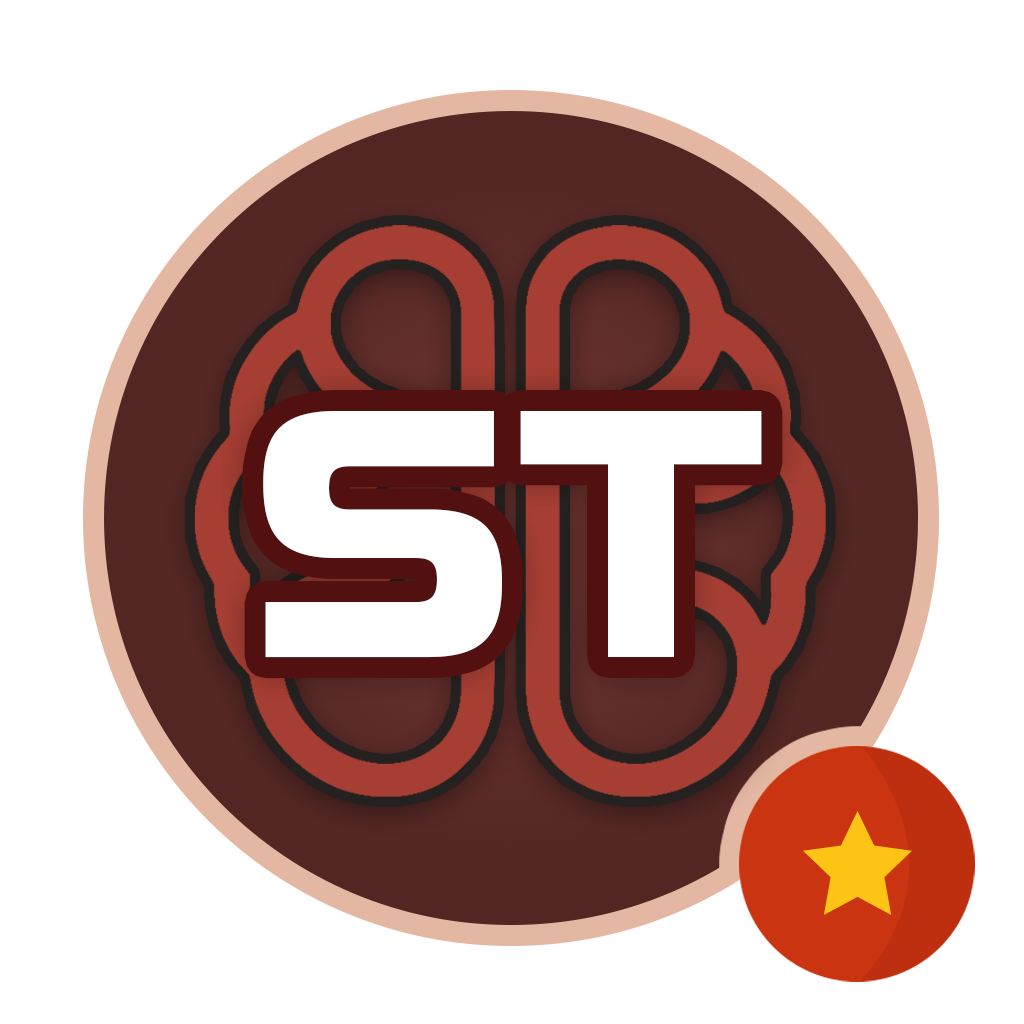
<style>
.page{position:relative;width:1024px;height:1024px;background:#ffffff}
.page>*{position:absolute;margin:0}
.t1{font:337px "ToxigenesisRg-Bold";color:#ffffff}
</style>
<div class="page">
<p class="t1" style="left:263px;top:411px;width:499px;height:247px">ST</p>
</div>
